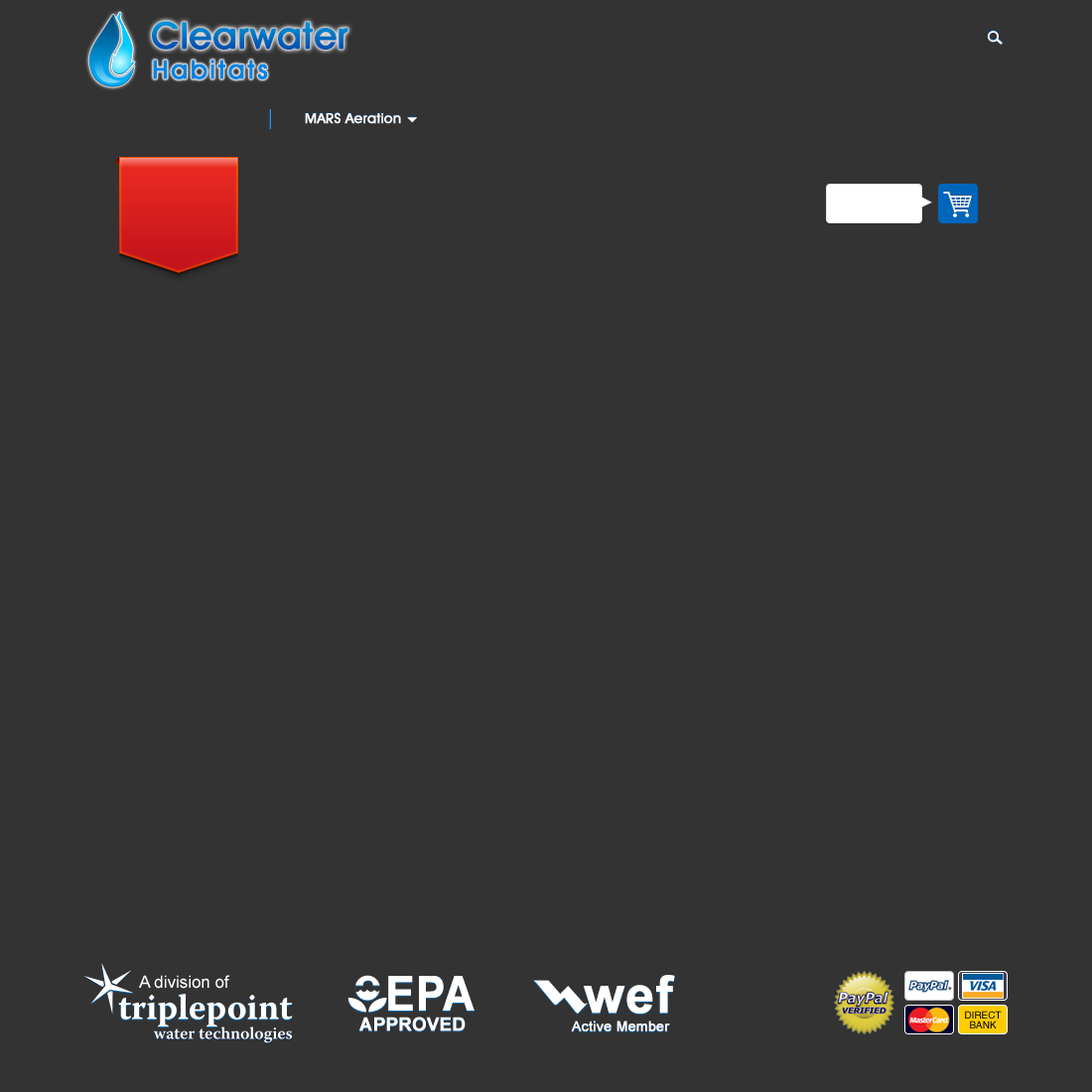
<style>
.page{position:relative;width:1092px;height:1092px;background:#333333}
.page>*{position:absolute;margin:0}
.t1{font:37.2px "AvantGardeITCbyBT-Medium";font-weight:bold}
.t2{font:25.9px "AvantGardeITCbyBT-Medium";letter-spacing:0.08em;color:#0085e3;font-weight:bold}
.t3{font:13.9px "AvantGardeITCbyBT-Medium";color:#ffffff;font-weight:bold}
.t4{font:13.9px "Webdings";color:#ffffff;font-weight:bold}
.t5{font:16.8px "ArialMT";color:#ffffff}
.t6{font:48px "Arial-BoldMT";color:#ffffff;font-weight:bold;scale:0.91 1}
.t7{font:48px "Arial-BoldMT";letter-spacing:-0.4em;color:#ffffff;font-weight:bold;scale:0.91 1}
.t8{font:51.5px "Arial-BoldMT";color:#ffffff;font-weight:bold}
.t9{font:18.2px "Arial-BoldMT";color:#ffffff;font-weight:bold}
.t10{font:13.9px "ArialMT";color:#ffffff;font-weight:bold}
</style>
<div class="page">
<p class="t1" style="left:152px;top:21px;width:196px;height:29px">Clearwater</p>
<p class="t2" style="left:153px;top:60px;width:115px;height:19px">Habitats</p>
<p class="t3" style="left:305px;top:112px;width:112px;height:12px">MARS Aeration <span class="t4">6</span></p>
<p class="t5" style="left:139px;top:975px;width:90px;height:14px">A division of</p>
<p class="t6" style="left:388px;top:976px;width:87px;height:35px">EP<span class="t7">A</span></p>
<p class="t8" style="left:584px;top:975px;width:91px;height:39px">wef</p>
<p class="t9" style="left:359px;top:1017px;width:107px;height:14px">APPROVED</p>
<p class="t10" style="left:571px;top:1021px;width:99px;height:10px">Active Member</p>
</div>
